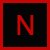
<style>
.page{position:relative;width:50px;height:50px;background:#040404}
.page>*{position:absolute;margin:0}
.t1{font:27.6px "LucidaGrande";color:#c70505}
</style>
<div class="page">
<p class="t1" style="left:17px;top:15px;width:17px;height:20px">N</p>
</div>
